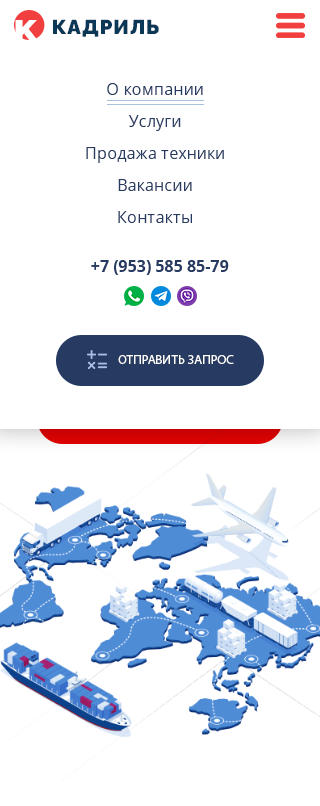
<style>
.page{position:relative;width:320px;height:806px;background:#ffffff}
.page>*{position:absolute;margin:0}
.t1{font:29.1px "Montserrat-Black";letter-spacing:0.01em;color:#ffffff}
.t2{font:20px "Raleway-Black";letter-spacing:0.05em;color:#0c3857}
.t3{font:16px/32px "OpenSans-Regular";letter-spacing:0.01em;color:#263a62}
.t4{font:16px "OpenSans-Bold";letter-spacing:0.01em;color:#263a62}
.t5{font:13px "MyriadPro-Regular";letter-spacing:0.01em;color:#ffffff;text-transform:uppercase}
</style>
<div class="page">
<p class="t1" style="left:15px;top:20px;width:23px;height:20px">K</p>
<p class="t2" style="left:53px;top:19px;width:106px;height:18px">КАДРИЛЬ</p>
<p class="t3" style="left:86px;top:83px;width:138px;height:140px;text-align:center">О компании<br>Услуги<br>Продажа техники<br>Вакансии<br>Контакты</p>
<p class="t4" style="left:91px;top:260px;width:138px;height:15px">+7 (953) 585 85-79</p>
<p class="t5" style="left:118px;top:355px;width:116px;height:9px">Отправить запрос</p>
</div>
